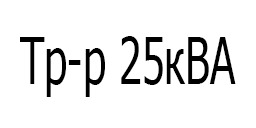
<style>
.page{position:relative;width:256px;height:128px;background:#ffffff}
.page>*{position:absolute;margin:0}
.t1{font:64.9px "Tahoma";color:#000000;scale:0.64 1}
</style>
<div class="page">
<p class="t1" style="left:20px;top:36px;width:216px;height:61px">Тр-р 25кВА</p>
</div>
